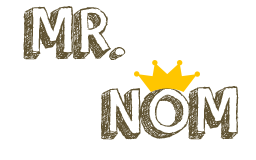
<style>
.page{position:relative;width:256px;height:160px;background:#ffffff}
.page>*{position:absolute;margin:0}
.t1{font:72px "orangejuice";color:#605332}
</style>
<div class="page">
<p class="t1" style="left:23px;top:6px;width:103px;height:54px">MR.</p>
<p class="t1" style="left:101px;top:86px;width:138px;height:54px">NOM</p>
</div>
